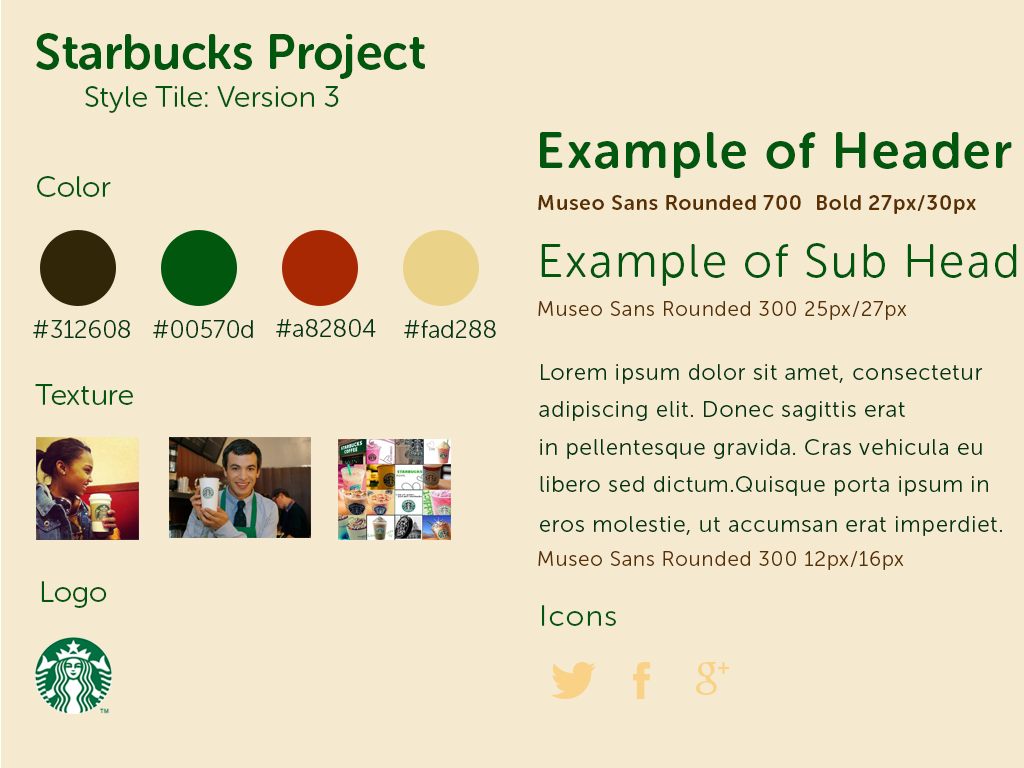
<style>
.page{position:relative;width:1024px;height:768px;background:#f5e9d0}
.page>*{position:absolute;margin:0}
.t1{font:48.8px "MuseoSansRounded-700";color:#00570d}
.t2{font:30px "MuseoSansRounded-300";color:#00570d}
.t3{font:50.6px "MuseoSansRounded-700";letter-spacing:0.044em;color:#00570d}
.t4{font:20.6px "MuseoSansRounded-700";letter-spacing:0.044em;color:#5b3000}
.t5{font:46.9px "MuseoSansRounded-300";letter-spacing:0.044em;color:#00570d}
.t6{font:20.6px "MuseoSansRounded-300";letter-spacing:0.044em;color:#5b3000}
.t7{font:24.4px "MuseoSansRounded-300";color:#003614}
.t8{font:22.5px/37.5px "MuseoSansRounded-300";letter-spacing:0.044em;color:#003614}
.t9{font:22.5px/40px "MuseoSansRounded-300";letter-spacing:0.044em;color:#003614}
.t10{font:30px "MuseoSansRounded-300";letter-spacing:0.044em;color:#00570d}
</style>
<div class="page">
<p class="t1" style="left:36px;top:33px;width:389px;height:46px">Starbucks Project</p>
<p class="t2" style="left:85px;top:86px;width:254px;height:27px">Style Tile: Version 3</p>
<p class="t3" style="left:540px;top:132px;width:472px;height:46px">Example of Header</p>
<p class="t2" style="left:37px;top:176px;width:74px;height:21px">Color</p>
<p class="t4" style="left:538px;top:195px;width:438px;height:19px">Museo Sans Rounded 700  Bold 27px/30px</p>
<p class="t5" style="left:541px;top:243px;width:476px;height:43px">Example of Sub Head</p>
<p class="t6" style="left:538px;top:301px;width:369px;height:19px">Museo Sans Rounded 300 25px/27px</p>
<p class="t7" style="left:33px;top:320px;width:97px;height:18px">#312608</p>
<p class="t7" style="left:153px;top:320px;width:100px;height:18px">#00570d</p>
<p class="t7" style="left:276px;top:319px;width:100px;height:18px">#a82804</p>
<p class="t7" style="left:404px;top:320px;width:92px;height:18px">#fad288</p>
<p class="t8" style="left:539px;top:364px;width:463px;height:172px">Lorem ipsum dolor sit amet, consectetur <br>adipiscing elit. Donec sagittis erat <br>in pellentesque gravida. Cras vehicula eu <br>libero sed dictum.Quisque porta ipsum in<br>eros molestie, ut accumsan erat imperdiet<span class="t9">.</span></p>
<p class="t2" style="left:35px;top:384px;width:98px;height:21px">Texture</p>
<p class="t6" style="left:538px;top:551px;width:366px;height:19px">Museo Sans Rounded 300 12px/16px</p>
<p class="t2" style="left:41px;top:581px;width:66px;height:27px">Logo</p>
<p class="t10" style="left:542px;top:605px;width:74px;height:21px">Icons</p>
</div>
